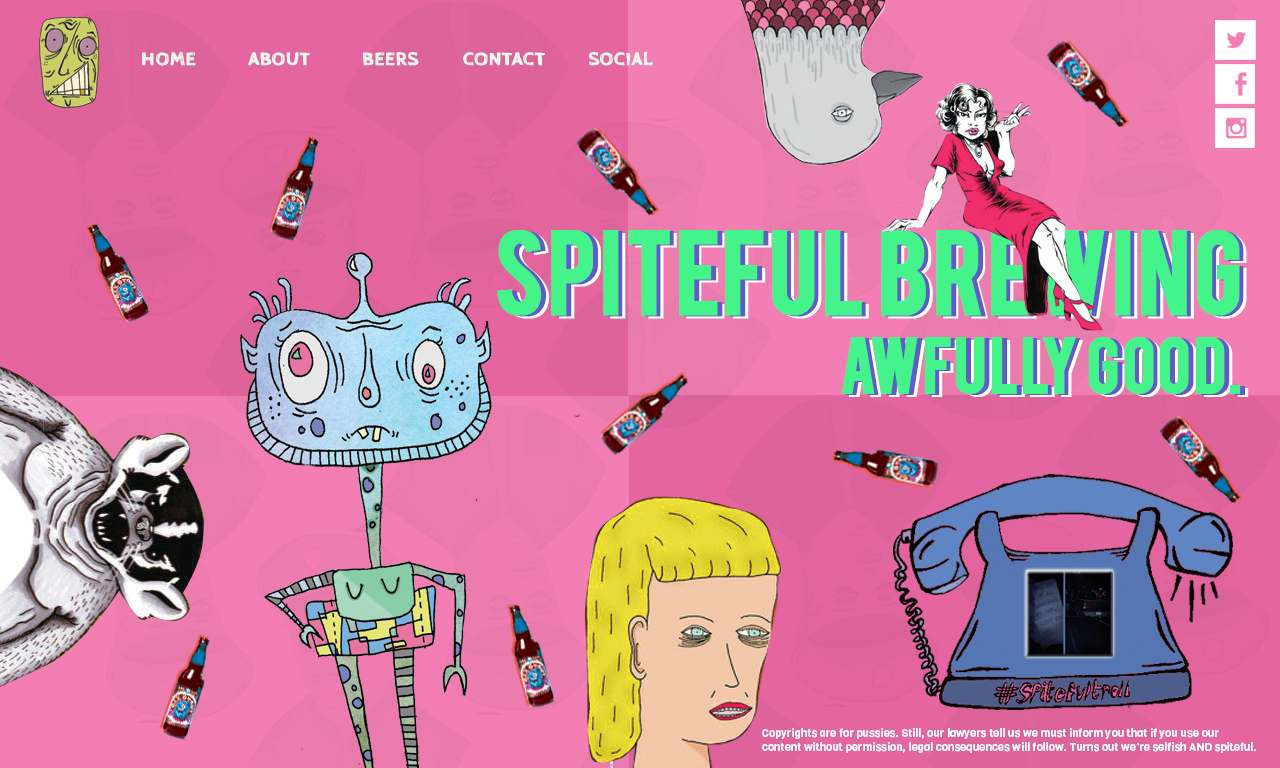
<style>
.page{position:relative;width:1280px;height:768px}
.page>*{position:absolute;margin:0}
.t1{font:19.5px "CabinSketch-Bold";color:#eff7ee;font-weight:bold}
.t2{font:92.6px/80.5px "Bebas";color:#44f48a;font-weight:bold}
.t3{font:62.9px/80.5px "Bebas";color:#44f48a;font-weight:bold}
.t4{font:92.6px/80.5px "Bebas";font-weight:bold}
.t5{font:62.9px/80.5px "Bebas";font-weight:bold}
.t6{font:11.4px/13.5px "Viga-Regular";color:#ffffff}
</style>
<div class="page">
<p class="t1" style="left:141px;top:52px;width:55px;height:14px">HOME</p>
<p class="t1" style="left:248px;top:52px;width:62px;height:14px">ABOUT</p>
<p class="t1" style="left:363px;top:52px;width:56px;height:14px">BEERS</p>
<p class="t1" style="left:463px;top:52px;width:82px;height:14px">CONTACT</p>
<p class="t1" style="left:589px;top:52px;width:64px;height:14px">SOCIAL</p>
<p class="t2" style="left:497px;top:230px;width:744px;height:164px;text-align:right">SPITEFUL BREWING <br><span class="t3">awfully good.</span></p>
<p class="t4" style="left:502px;top:231px;width:744px;height:164px;text-align:right">SPITEFUL BREWING <br><span class="t5">awfully good.</span></p>
<p class="t4" style="left:505px;top:233px;width:744px;height:164px;text-align:right">SPITEFUL BREWING <br><span class="t5">awfully good.</span></p>
<p class="t6" style="left:762px;top:728px;width:494px;height:25px">Copyrights are for pussies. Still, our lawyers tell us we must inform you that if you use our <br>content without permission, legal consequences will follow. Turns out we’re selfish AND spiteful.</p>
</div>
